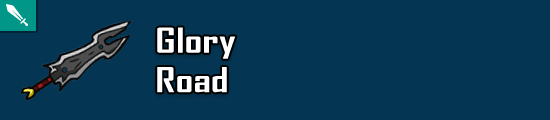
<style>
.page{position:relative;width:550px;height:120px;background:#043654}
.page>*{position:absolute;margin:0}
.t1{font:32.9px "AgencyFB-Bold";color:#ffffff;scale:1.33 1}
</style>
<div class="page">
<p class="t1" style="left:157px;top:27px;width:79px;height:66px">Glory <br>Road</p>
</div>
